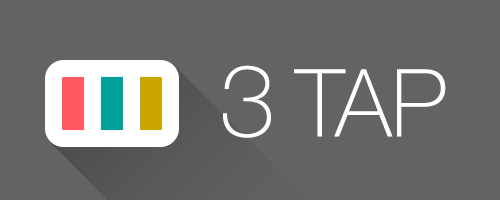
<style>
.page{position:relative;width:500px;height:200px;background:#636363}
.page>*{position:absolute;margin:0}
.t1{font:93.7px "HelveticaNeueLTStd-Th";color:#ffffff}
.t2{font:100.4px "HelveticaNeueLTStd-Th";color:#ffffff}
</style>
<div class="page">
<p class="t1" style="left:223px;top:65px;width:223px;height:73px"><span class="t2">3</span>TAP</p>
</div>
